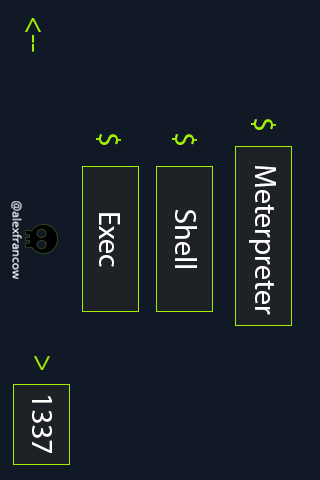
<style>
.page{position:relative;width:320px;height:480px;background:#111927}
.page>*{position:absolute;margin:0}
.t1{font:30px "MyriadPro-Regular";color:#9fef00}
.t2{font:30px "MyriadPro-Regular";color:#ffffff}
.t3{font:12px "OpenSans-Regular";color:#ffffff}
</style>
<div class="page">
<p class="t1" style="left:25px;top:18px;width:16px;height:34px;rotate:90deg">&lt;--</p>
<p class="t1" style="left:251px;top:119px;width:25px;height:11px;rotate:90deg">$</p>
<p class="t1" style="left:96px;top:134px;width:25px;height:11px;rotate:90deg">$</p>
<p class="t1" style="left:172px;top:134px;width:25px;height:11px;rotate:90deg">$</p>
<p class="t2" style="left:249px;top:166px;width:27px;height:149px;rotate:90deg">Meterpreter</p>
<p class="t3" style="left:11px;top:201px;width:11px;height:78px;rotate:90deg">@alexfrancow</p>
<p class="t2" style="left:175px;top:209px;width:22px;height:59px;rotate:90deg">Shell</p>
<p class="t2" style="left:99px;top:213px;width:21px;height:54px;rotate:90deg">Exec</p>
<p class="t1" style="left:34px;top:356px;width:16px;height:14px;rotate:90deg">&gt;</p>
<p class="t2" style="left:32px;top:396px;width:20px;height:57px;rotate:90deg">1337</p>
</div>
